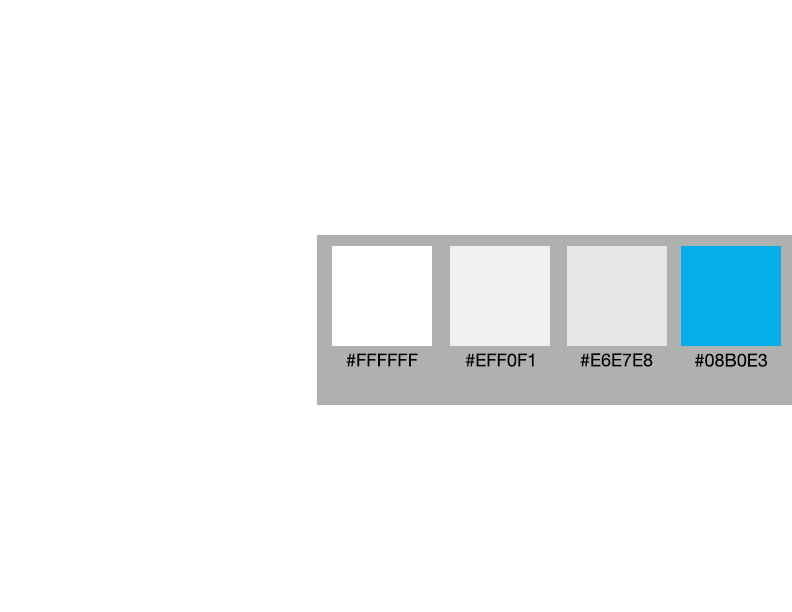
<style>
.page{position:relative;width:792px;height:612px;background:#ffffff}
.page>*{position:absolute;margin:0}
.t1{font:18px "HelveticaNeue";color:#000000}
</style>
<div class="page">
<p class="t1" style="left:346px;top:353px;width:72px;height:14px">#FFFFFF</p>
<p class="t1" style="left:465px;top:353px;width:69px;height:14px">#EFF0F1</p>
<p class="t1" style="left:580px;top:353px;width:73px;height:14px">#E6E7E8</p>
<p class="t1" style="left:695px;top:353px;width:73px;height:14px">#08B0E3</p>
</div>
